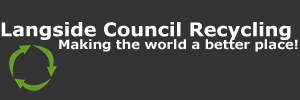
<style>
.page{position:relative;width:300px;height:100px;background:#333333}
.page>*{position:absolute;margin:0}
.t1{font:18.9px "Verdana-Bold";color:#ffffff}
.t2{font:12.9px "Verdana-Bold";color:#ffffff}
</style>
<div class="page">
<p class="t1" style="left:1px;top:22px;width:290px;height:18px">Langside Council Recycling</p>
<p class="t2" style="left:59px;top:39px;width:239px;height:13px">Making the world a better place!</p>
</div>
